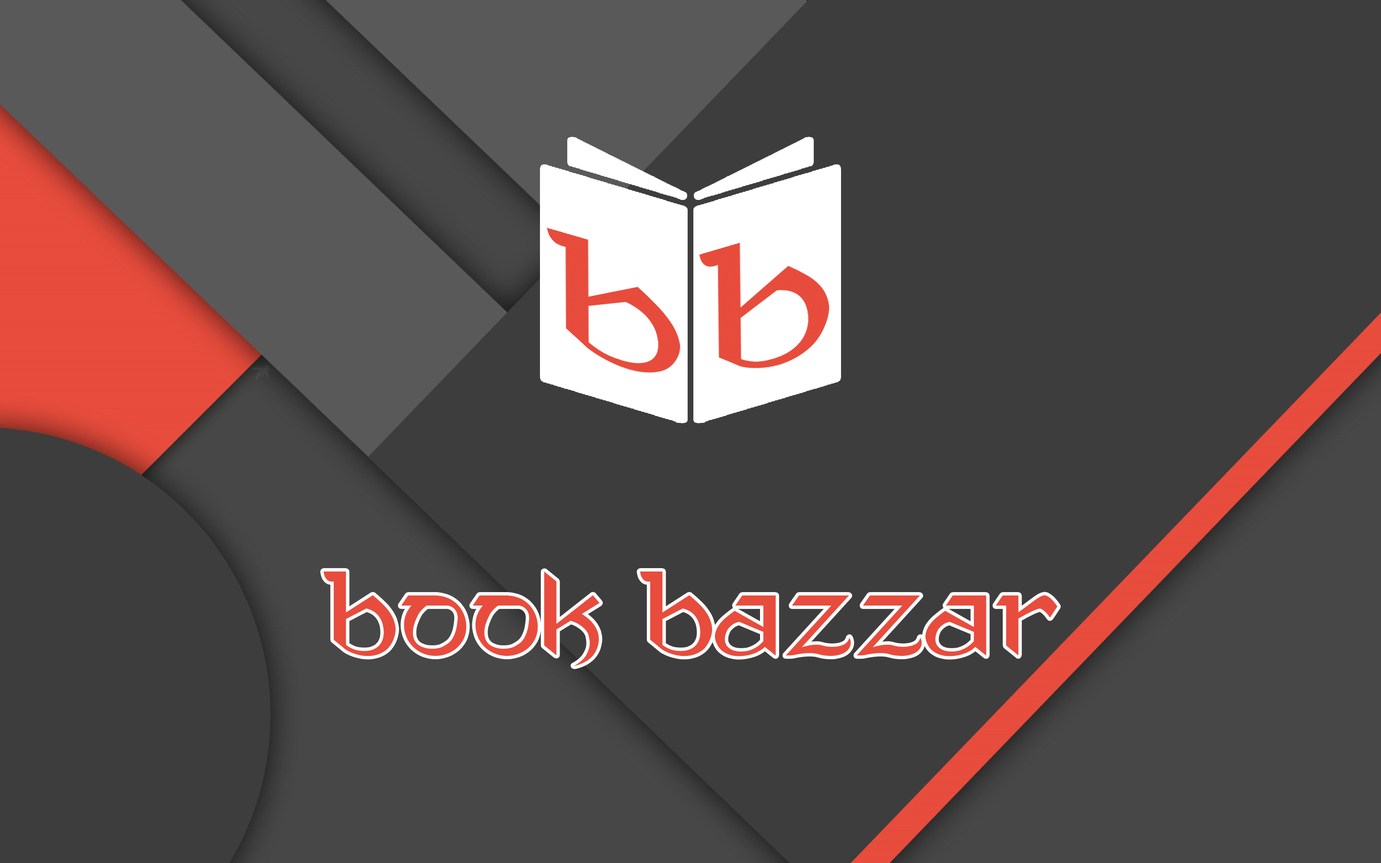
<style>
.page{position:relative;width:1381px;height:863px;background:#3d3d3d}
.page>*{position:absolute;margin:0}
.t1{font:113.9px "AnandaNeptouch";color:#e84c3d;scale:1.2 1}
</style>
<div class="page">
<p class="t1" style="left:323px;top:572px;width:735px;height:94px">Book Bazzar</p>
</div>
